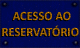
<style>
.page{position:relative;width:80px;height:48px;background:#000852}
.page>*{position:absolute;margin:0}
.t1{font:12.7px/16px "Calibri-Bold";color:#a26700;text-transform:uppercase}
.t2{font:12.7px/16px "Calibri-Bold";letter-spacing:0.04em;color:#a26700;text-transform:uppercase}
</style>
<div class="page">
<p class="t1" style="left:2px;top:11px;width:77px;height:26px;text-align:center"><span class="t2"> </span>ACESSO AO<br>RESERVATÓRIO</p>
</div>
